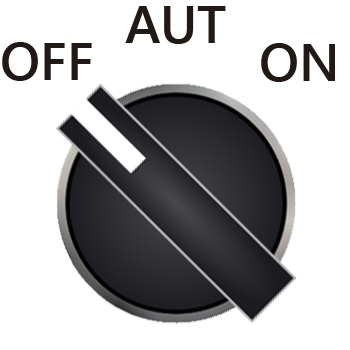
<style>
.page{position:relative;width:350px;height:350px;background:#ffffff}
.page>*{position:absolute;margin:0}
.t1{font:53.3px "SegoeUI-Semibold";color:#211916}
</style>
<div class="page">
<p class="t1" style="left:125px;top:6px;width:101px;height:38px">AUT</p>
<p class="t1" style="left:2px;top:42px;width:90px;height:39px">OFF</p>
<p class="t1" style="left:261px;top:43px;width:74px;height:39px">ON</p>
</div>
